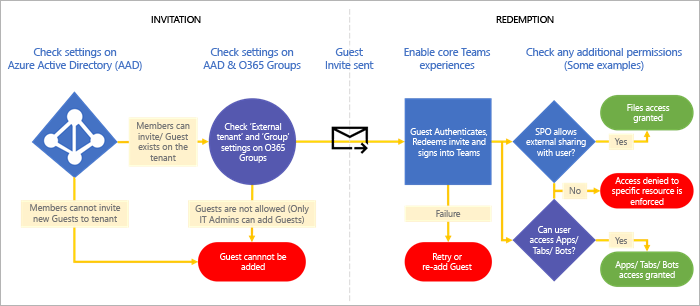
<style>
.page{position:relative;width:700px;height:306px;background:#ffffff}
.page>*{position:absolute;margin:0}
.t1{font:9.6px "SegoeUI";color:#000000}
.t2{font:10.6px "SegoeUI";color:#4472c4}
.t3{font:8.5px "SegoeUI";color:#ffffff}
.t4{font:9px "SegoeUI";color:#757575}
.t5{font:8.5px "SegoeUI";color:#757575}
</style>
<div class="page">
<p class="t1" style="left:151px;top:16px;width:50px;height:7px">INVITATION</p>
<p class="t1" style="left:496px;top:16px;width:58px;height:7px">REDEMPTION</p>
<p class="t2" style="left:7px;top:48px;width:135px;height:23px;text-align:center">Check settings on<br>Azure Active Directory (AAD)</p>
<p class="t2" style="left:203px;top:48px;width:98px;height:23px;text-align:center">Check settings on<br>AAD &amp; O365 Groups</p>
<p class="t2" style="left:325px;top:48px;width:49px;height:21px;text-align:center">Guest<br>Invite sent</p>
<p class="t2" style="left:404px;top:48px;width:87px;height:23px;text-align:center">Enable core Teams<br>experiences</p>
<p class="t2" style="left:526px;top:48px;width:156px;height:23px;text-align:center">Check any additional permissions<br>(Some examples)</p>
<p class="t3" style="left:627px;top:104px;width:43px;height:19px;text-align:center">Files access<br>granted</p>
<p class="t4" style="left:137px;top:122px;width:53px;height:39px;text-align:center">Members can<br>invite/ Guest<br>exists on the<br>tenant</p>
<p class="t3" style="left:216px;top:123px;width:74px;height:40px;text-align:center">Check ‘External<br>tenant’ and ‘Group’<br>settings on O365<br>Groups</p>
<p class="t3" style="left:410px;top:128px;width:78px;height:30px;text-align:center">Guest Authenticates,<br>Redeems invite and<br>signs into Teams</p>
<p class="t3" style="left:526px;top:128px;width:60px;height:28px;text-align:center">SPO allows<br>external sharing<br>with user?</p>
<p class="t4" style="left:614px;top:138px;width:13px;height:7px">Yes</p>
<p class="t3" style="left:612px;top:177px;width:70px;height:28px;text-align:center">Access denied to<br>specific resource is<br>enforced</p>
<p class="t4" style="left:569px;top:187px;width:12px;height:7px">No</p>
<p class="t4" style="left:30px;top:204px;width:91px;height:18px;text-align:center">Members cannot invite<br>new Guests to tenant</p>
<p class="t4" style="left:195px;top:205px;width:114px;height:19px;text-align:center">Guests are not allowed (Only<br>IT Admins can add Guests)</p>
<p class="t5" style="left:436px;top:210px;width:25px;height:7px">Failure</p>
<p class="t3" style="left:529px;top:226px;width:50px;height:29px;text-align:center">Can user<br>access Apps/<br>Tabs/ Bots?</p>
<p class="t5" style="left:615px;top:237px;width:12px;height:7px">Yes</p>
<p class="t3" style="left:220px;top:253px;width:67px;height:17px;text-align:center">Guest cannnot be<br>added</p>
<p class="t3" style="left:422px;top:253px;width:50px;height:17px;text-align:center">Retry or<br>re-add Guest</p>
<p class="t3" style="left:615px;top:261px;width:64px;height:19px;text-align:center">Apps/ Tabs/ Bots<br>access granted</p>
</div>
